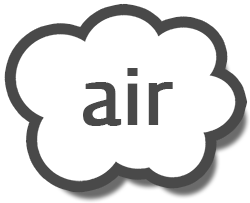
<style>
.page{position:relative;width:250px;height:203px;background:#ffffff}
.page>*{position:absolute;margin:0}
.t1{font:67.5px "Daum_Regular";color:#494949;font-weight:bold}
</style>
<div class="page">
<p class="t1" style="left:83px;top:68px;width:90px;height:58px">air</p>
</div>
